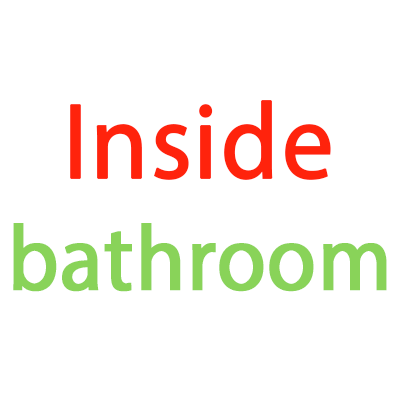
<style>
.page{position:relative;width:400px;height:400px;background:#ffffff}
.page>*{position:absolute;margin:0}
.t1{font:92.6px "MyriadPro-Regular";color:#89d359;font-weight:bold;scale:0.95 1}
.t2{font:108.4px "MyriadPro-Regular";color:#ff230c;font-weight:bold;scale:0.95 1}
</style>
<div class="page">
<p class="t1" style="left:13px;top:100px;width:374px;height:192px;text-align:center"><span class="t2">Inside<br></span>bathroom</p>
</div>
